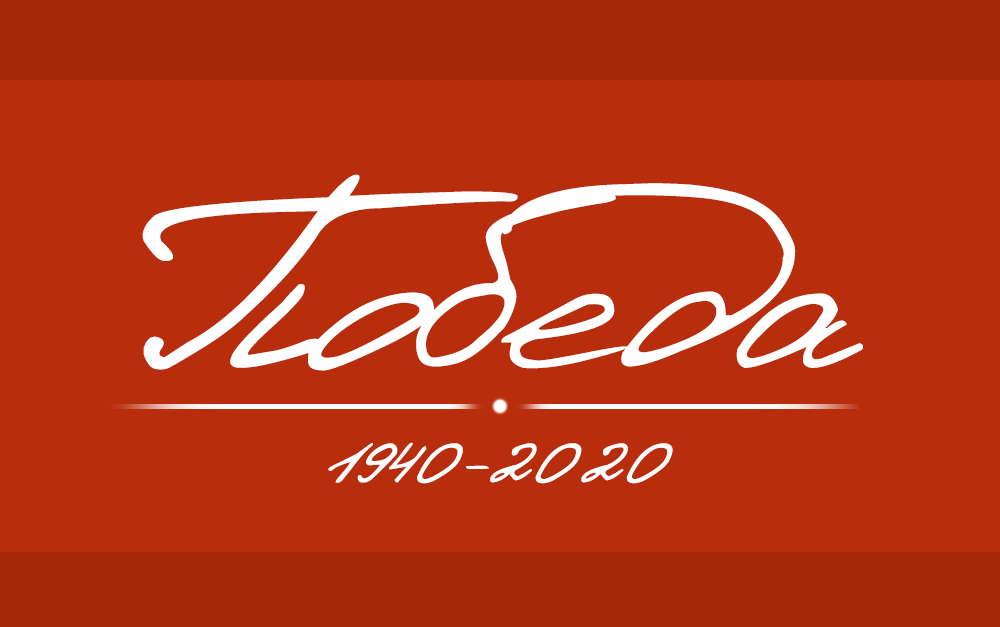
<style>
.page{position:relative;width:1000px;height:627px;background:#b82d0c}
.page>*{position:absolute;margin:0}
.t1{font:300px "Denistina";color:#ffffff}
.t2{font:100px "Denistina";color:#ffffff}
</style>
<div class="page">
<p class="t1" style="left:142px;top:174px;width:721px;height:197px">Победа</p>
<p class="t2" style="left:328px;top:442px;width:345px;height:42px">1940-2020</p>
</div>
